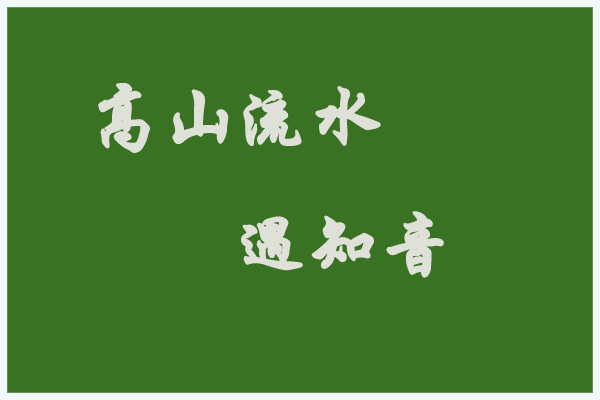
<style>
.page{position:relative;width:600px;height:400px;background:#3a7224}
.page>*{position:absolute;margin:0}
.t1{font:72px "STXingkai";color:#dfe0d8;font-weight:bold}
</style>
<div class="page">
<p class="t1" style="left:98px;top:83px;width:346px;height:195px;text-align:center">高山流水<br>      遇知音</p>
</div>
